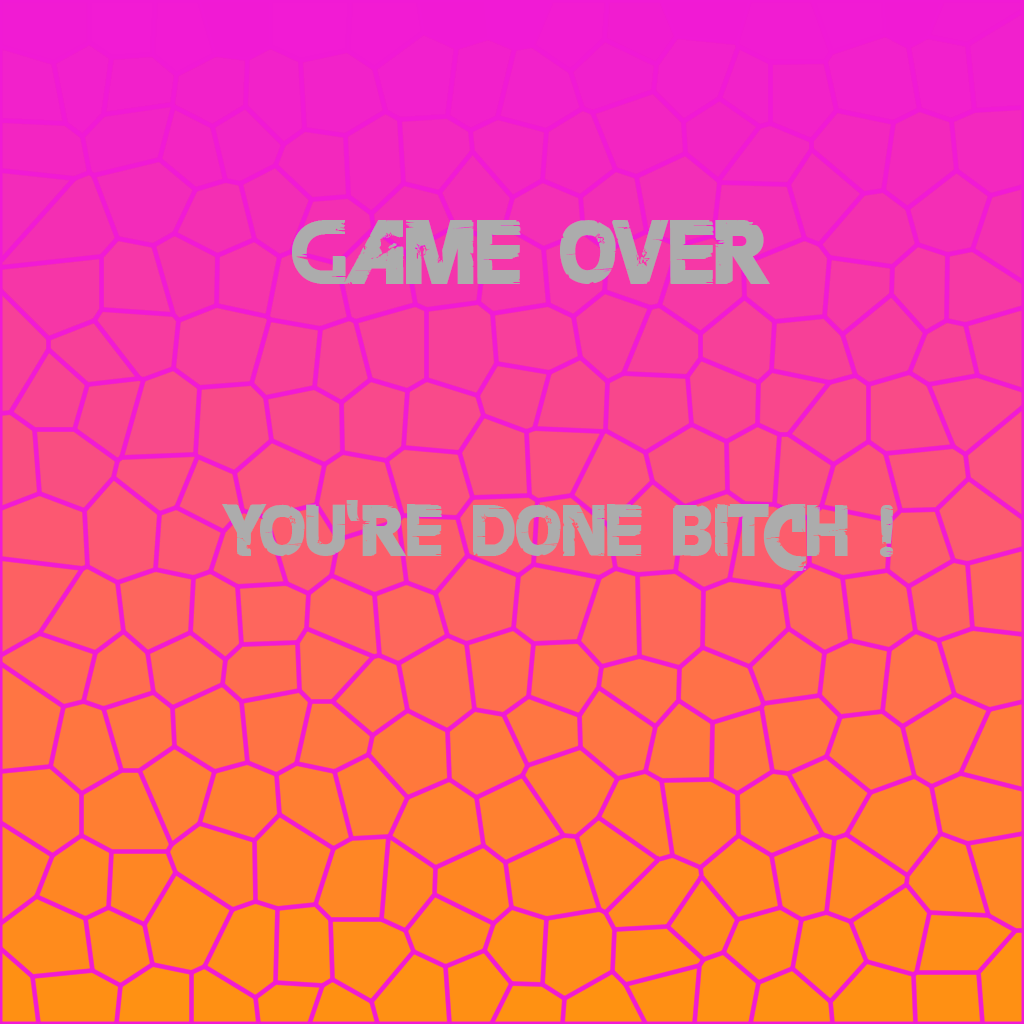
<style>
.page{position:relative;width:1024px;height:1024px}
.page>*{position:absolute;margin:0}
.t1{font:80px "FarCryExtraBold";color:#acacac}
.t2{font:64px "FarCryExtraBold";color:#acacac}
</style>
<div class="page">
<p class="t1" style="left:292px;top:220px;width:478px;height:64px">GAME OVER</p>
<p class="t2" style="left:222px;top:500px;width:672px;height:71px">YOU'RE DONE BITCH !</p>
</div>
